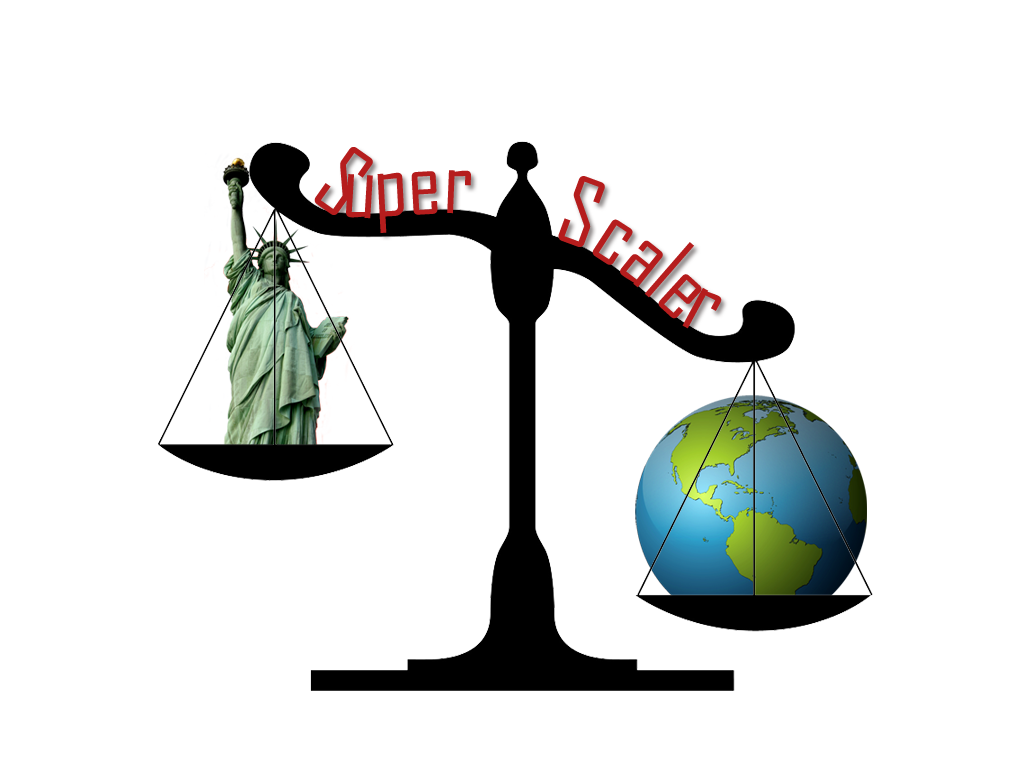
<style>
.page{position:relative;width:1024px;height:768px;background:#ffffff}
.page>*{position:absolute;margin:0}
.t1{font:90px "AgencyFB-Reg";color:#b51d1d}
</style>
<div class="page">
<p class="t1" style="left:314px;top:147px;width:157px;height:86px">Supere</p>
<p class="t1" style="left:558px;top:176px;width:164px;height:153px">Scalerr</p>
</div>
